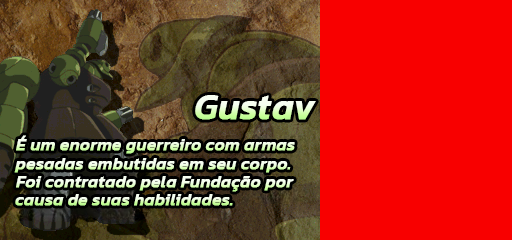
<style>
.page{position:relative;width:512px;height:240px;background:#f80000}
.page>*{position:absolute;margin:0}
.t1{font:36px "Kanit-MediumItalic";font-weight:bold}
.t2{font:17px "Kanit-MediumItalic";font-weight:bold}
</style>
<div class="page">
<p class="t1" style="left:195px;top:95px;width:121px;height:25px">Gustav</p>
<p class="t2" style="left:16px;top:135px;width:279px;height:19px">É um enorme guerreiro com armas</p>
<p class="t2" style="left:14px;top:158px;width:277px;height:15px">pesadas embutidas em seu corpo.</p>
<p class="t2" style="left:16px;top:176px;width:278px;height:16px">Foi contratado pela Fundação por</p>
<p class="t2" style="left:15px;top:194px;width:218px;height:12px">causa de suas habilidades.</p>
</div>
